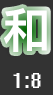
<style>
.page{position:relative;width:53px;height:95px;background:#333333}
.page>*{position:absolute;margin:0}
.t1{font:48px "PingFang-SC-Heavy";color:#ffffff}
.t2{font:24px "System";color:#ffffff}
</style>
<div class="page">
<p class="t1" style="left:4px;top:8px;width:43px;height:44px">和</p>
<p class="t2" style="left:13px;top:73px;width:28px;height:15px">1:8</p>
</div>
